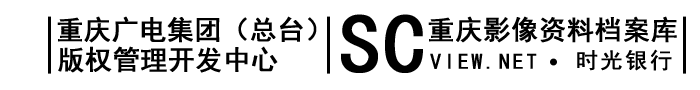
<style>
.page{position:relative;width:700px;height:90px;background:#ffffff}
.page>*{position:absolute;margin:0}
.t1{font:27px "SimHei";color:#000000;font-weight:bold}
.t2{font:84px "SimHei";color:#000000;font-weight:bold}
.t3{font:27px "SimHei";letter-spacing:0.01em;color:#000000;font-weight:bold}
.t4{font:22px "SimHei";letter-spacing:0.1em;color:#000000;font-weight:bold}
</style>
<div class="page">
<p class="t1" style="left:57px;top:16px;width:260px;height:27px">重庆广电集团（总台）</p>
<p class="t2" style="left:341px;top:14px;width:82px;height:59px">SC</p>
<p class="t3" style="left:428px;top:16px;width:249px;height:27px">重庆影像资料档案库</p>
<p class="t1" style="left:58px;top:46px;width:220px;height:27px">版权管理开发中心</p>
<p class="t4" style="left:430px;top:53px;width:107px;height:16px">VIEW.NET</p>
<p class="t4" style="left:577px;top:49px;width:95px;height:22px">时光银行</p>
</div>
